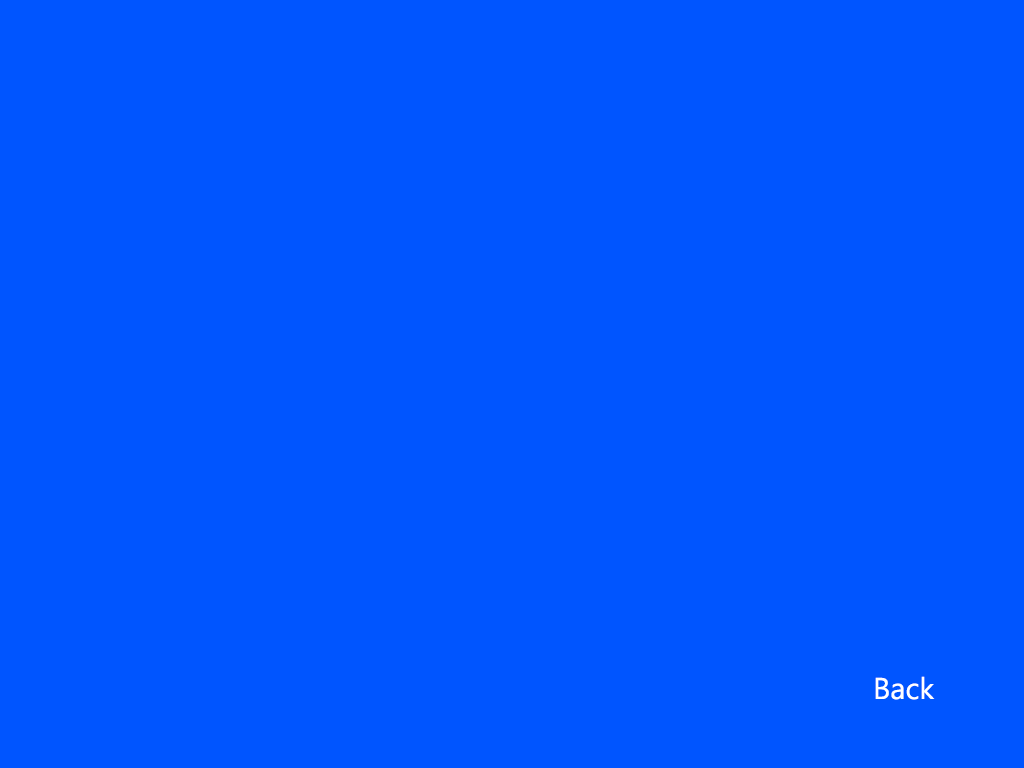
<style>
.page{position:relative;width:1024px;height:768px;background:#0055ff}
.page>*{position:absolute;margin:0}
.t1{font:30px "Gadugi";color:#ffffff}
</style>
<div class="page">
<p class="t1" style="left:875px;top:676px;width:60px;height:24px">Back</p>
</div>
